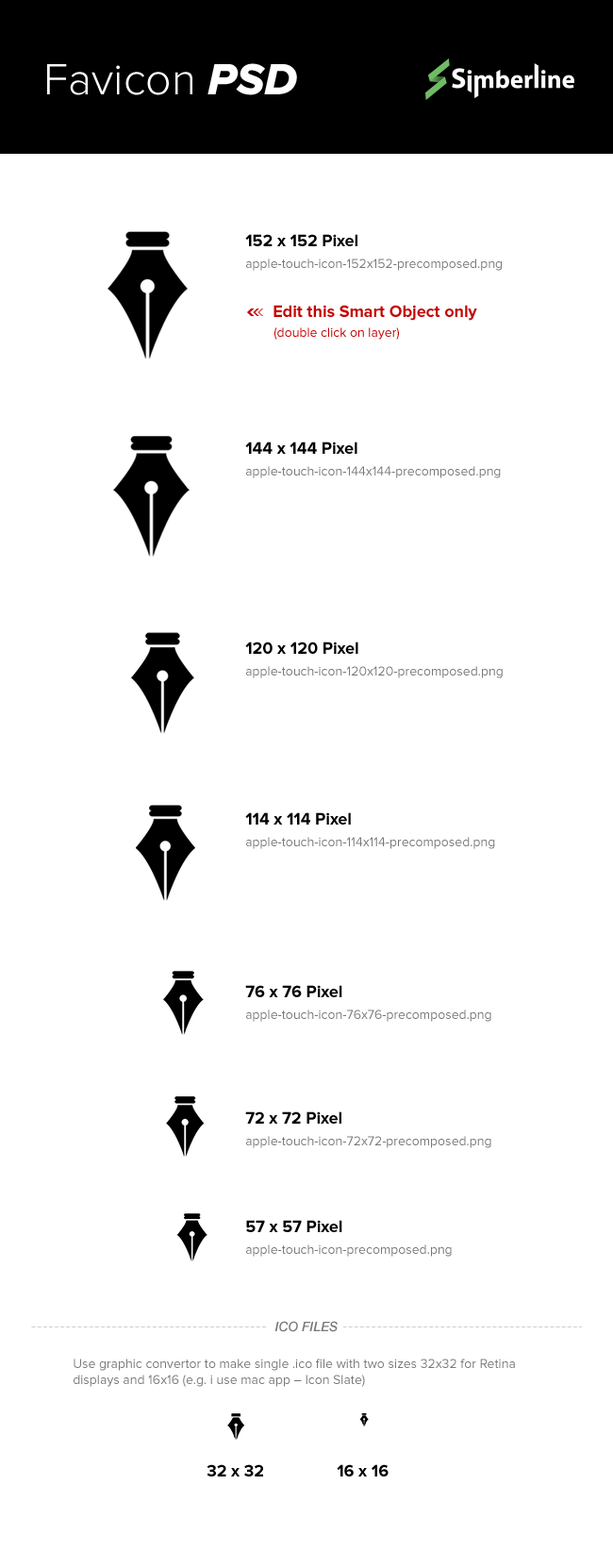
<style>
.page{position:relative;width:613px;height:1568px;background:#ffffff}
.page>*{position:absolute;margin:0}
.t1{font:45.3px "ProximaNova-Light";color:#ffffff}
.t2{font:45.3px "ProximaNova-ExtrabldIt";color:#ffffff}
.t3{font:17px "ProximaNova-Bold";color:#000000}
.t4{font:13.2px "ProximaNova-Regular";color:#777777}
.t5{font:17px "ProximaNova-Bold";color:#c40000}
.t6{font:13.2px "ProximaNova-Regular";color:#c40000}
.t7{font:13.2px "HelveticaNeue-MediumItalic";color:#777777;text-transform:uppercase}
</style>
<div class="page">
<p class="t1" style="left:47px;top:63px;width:250px;height:32px">Favicon <span class="t2">PSD</span></p>
<p class="t3" style="left:245px;top:234px;width:113px;height:12px">152 x 152 Pixel</p>
<p class="t4" style="left:246px;top:259px;width:256px;height:12px">apple-touch-icon-152x152-precomposed.png</p>
<p class="t5" style="left:274px;top:305px;width:203px;height:16px">Edit this Smart Object only</p>
<p class="t6" style="left:275px;top:327px;width:124px;height:13px">(double click on layer)</p>
<p class="t3" style="left:245px;top:442px;width:113px;height:12px">144 x 144 Pixel</p>
<p class="t4" style="left:246px;top:466px;width:255px;height:12px">apple-touch-icon-144x144-precomposed.png</p>
<p class="t3" style="left:245px;top:642px;width:114px;height:12px">120 x 120 Pixel</p>
<p class="t4" style="left:246px;top:666px;width:257px;height:12px">apple-touch-icon-120x120-precomposed.png</p>
<p class="t3" style="left:245px;top:812px;width:106px;height:13px">114 x 114 Pixel</p>
<p class="t4" style="left:246px;top:837px;width:249px;height:12px">apple-touch-icon-114x114-precomposed.png</p>
<p class="t3" style="left:245px;top:985px;width:97px;height:12px">76 x 76 Pixel</p>
<p class="t4" style="left:246px;top:1009px;width:246px;height:13px">apple-touch-icon-76x76-precomposed.png</p>
<p class="t3" style="left:245px;top:1111px;width:97px;height:13px">72 x 72 Pixel</p>
<p class="t4" style="left:246px;top:1136px;width:246px;height:12px">apple-touch-icon-72x72-precomposed.png</p>
<p class="t3" style="left:246px;top:1220px;width:96px;height:12px">57 x 57 Pixel</p>
<p class="t4" style="left:246px;top:1244px;width:206px;height:13px">apple-touch-icon-precomposed.png</p>
<p class="t7" style="left:275px;top:1321px;width:63px;height:11px">ico files</p>
<p class="t4" style="left:74px;top:1359px;width:441px;height:28px">Use graphic convertor to make single .ico file with two sizes 32x32 for Retina displays and 16x16 (e.g. i use mac app – Icon Slate)</p>
<p class="t3" style="left:207px;top:1464px;width:56px;height:12px">32 x 32</p>
<p class="t3" style="left:337px;top:1464px;width:52px;height:12px">16 x 16</p>
</div>
